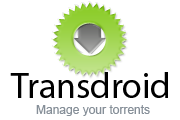
<style>
.page{position:relative;width:180px;height:120px;background:#ffffff}
.page>*{position:absolute;margin:0}
.t1{font:36px "MyriadPro-Regular";color:#000000}
.t2{font:12px "ArialMT";color:#868f98}
</style>
<div class="page">
<p class="t1" style="left:10px;top:72px;width:158px;height:26px">Transdroid</p>
<p class="t2" style="left:36px;top:105px;width:114px;height:11px">Manage your torrents</p>
</div>
